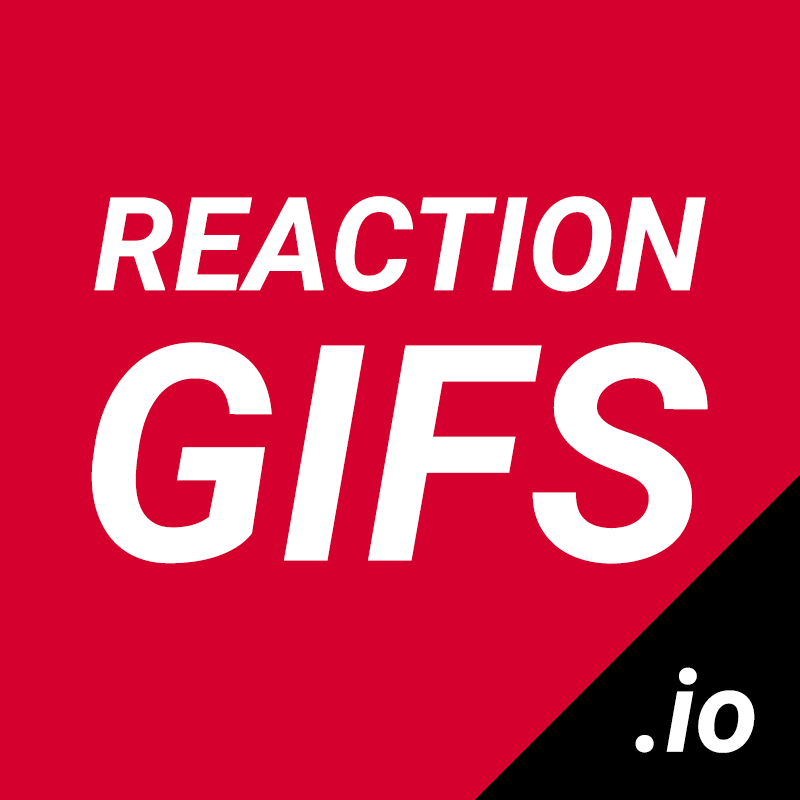
<style>
.page{position:relative;width:800px;height:800px;background:#d5002d}
.page>*{position:absolute;margin:0}
.t1{font:130px "Roboto-BoldItalic";color:#ffffff}
.t2{font:302px "Roboto-BoldItalic";color:#ffffff}
.t3{font:113.6px "Roboto-BoldItalic";color:#ffffff}
</style>
<div class="page">
<p class="t1" style="left:94px;top:196px;width:612px;height:96px">REACTION</p>
<p class="t2" style="left:91px;top:342px;width:617px;height:222px">GIFS</p>
<p class="t3" style="left:635px;top:667px;width:120px;height:86px">.io</p>
</div>
